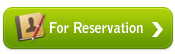
<style>
.page{position:relative;width:175px;height:54px;background:#ffffff}
.page>*{position:absolute;margin:0}
.t1{font:14.8px "BellGothicStd-Bold";color:#ffffff;scale:0.95 1}
</style>
<div class="page">
<p class="t1" style="left:50px;top:22px;width:93px;height:11px">For Reservation</p>
</div>
